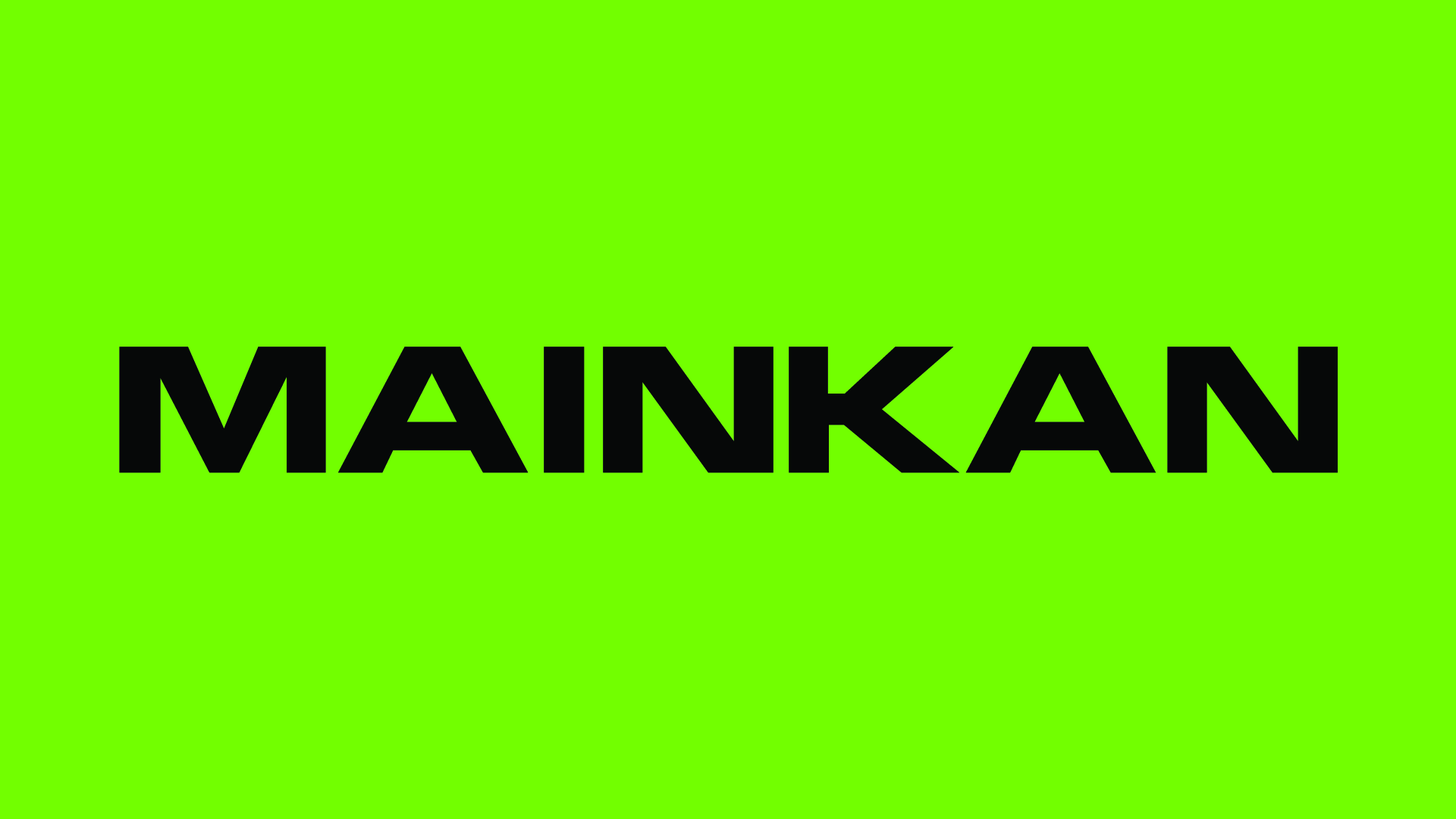
<style>
.page{position:relative;width:1456px;height:819px;background:#72ff00}
.page>*{position:absolute;margin:0}
.t1{font:158px "MicroTechnicExtBold";color:#060808}
</style>
<div class="page">
<p class="t1" style="left:119px;top:347px;width:1219px;height:126px">MAINKAN</p>
</div>
